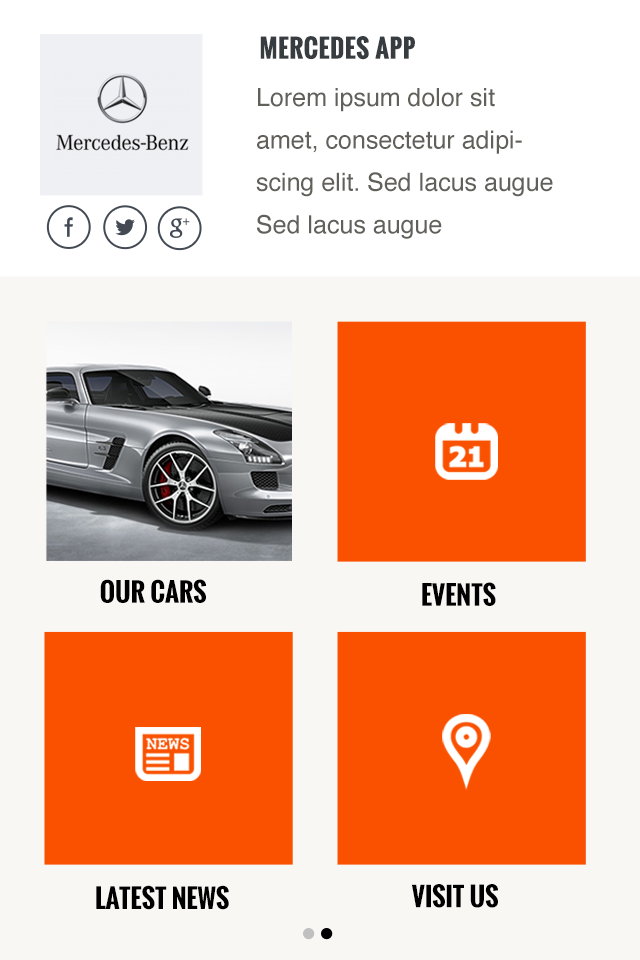
<style>
.page{position:relative;width:640px;height:960px;background:#f8f7f4}
.page>*{position:absolute;margin:0}
.t1{font:25px "Oswald-Bold";letter-spacing:0.025em;color:#373c40}
.t2{font:25px/42.4px "Helvetica";color:#61605a}
.t3{font:25.8px "Oswald-Bold";color:#000000}
</style>
<div class="page">
<p class="t1" style="left:260px;top:36px;width:155px;height:24px">MERCEDES APP</p>
<p class="t2" style="left:256px;top:88px;width:297px;height:151px">Lorem ipsum dolor sit amet, consectetur adipiscing elit. Sed lacus augue<br>Sed lacus augue</p>
<p class="t3" style="left:100px;top:579px;width:106px;height:24px">OUR CARS</p>
<p class="t3" style="left:422px;top:582px;width:74px;height:24px">EVENTS</p>
<p class="t3" style="left:96px;top:885px;width:133px;height:25px">LATEST NEWS</p>
<p class="t3" style="left:412px;top:884px;width:86px;height:24px">VISIT US</p>
</div>
